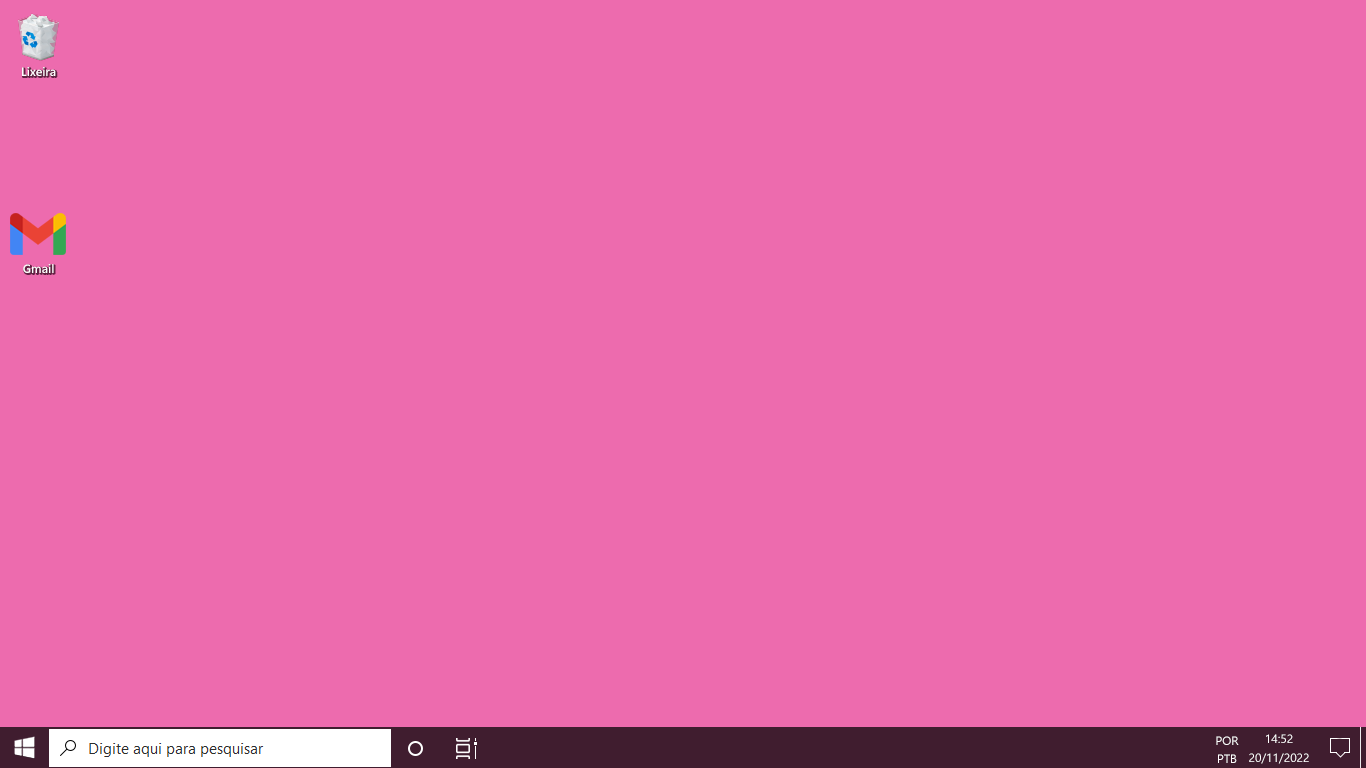
<style>
.page{position:relative;width:1366px;height:768px;background:#ed6bae}
.page>*{position:absolute;margin:0}
.t1{font:12px "SegoeUI-Semibold";color:#ffffff}
.t2{font:12px/18px "SegoeUI";color:#ffffff}
.t3{font:12px "SegoeUI";color:#ffffff}
</style>
<div class="page">
<p class="t1" style="left:22px;top:67px;width:34px;height:9px">Lixeira</p>
<p class="t1" style="left:23px;top:264px;width:31px;height:9px">Gmail</p>
<p class="t2" style="left:1216px;top:736px;width:23px;height:27px;text-align:center">POR<br>PTB</p>
<p class="t3" style="left:1266px;top:734px;width:27px;height:9px">14:52</p>
<p class="t3" style="left:1249px;top:753px;width:60px;height:11px">20/11/2022</p>
</div>
